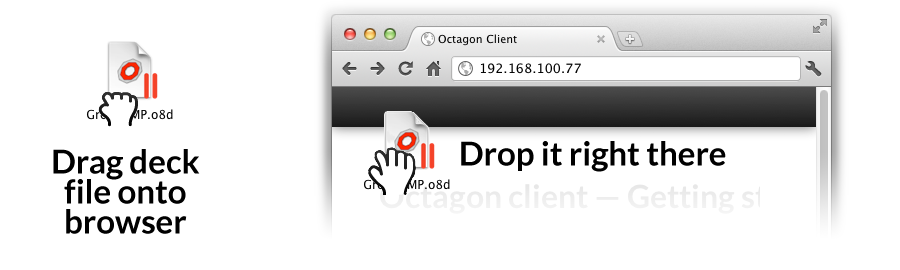
<style>
.page{position:relative;width:900px;height:270px;background:#ffffff}
.page>*{position:absolute;margin:0}
.t1{font:33px/30px "Lato-Bold";color:#000000}
.t2{font:33px "Lato-Bold";color:#000000}
</style>
<div class="page">
<p class="t1" style="left:53px;top:149px;width:147px;height:85px;text-align:center">Drag deck<br>file onto<br>browser</p>
<p class="t2" style="left:461px;top:141px;width:265px;height:31px">Drop it right there</p>
</div>
